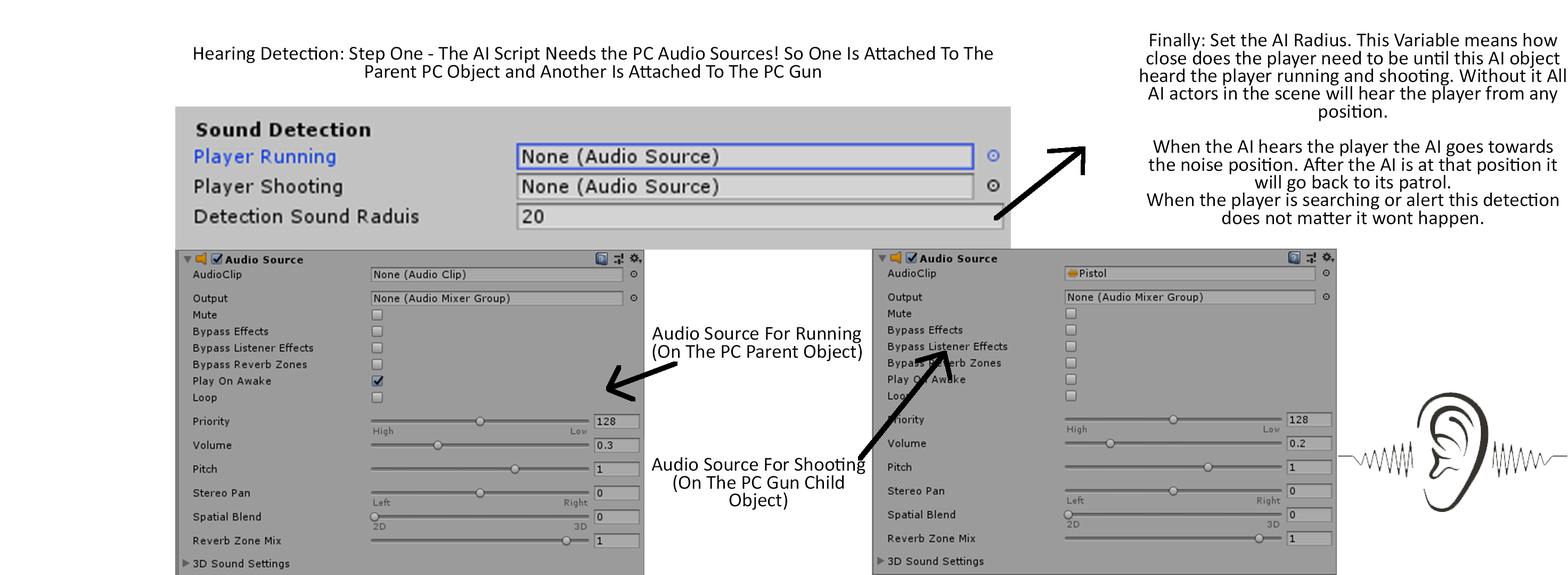
<style>
.page{position:relative;width:1568px;height:575px;background:#ffffff}
.page>*{position:absolute;margin:0}
.t1{font:20px/17.8px "Calibri";color:#000000}
</style>
<div class="page">
<p class="t1" style="left:1140px;top:32px;width:426px;height:196px;text-align:center">Finally: Set the AI Radius. This Variable means how close does the player need to be until this AI object heard the player running and shooting. Without it All AI actors in the scene will hear the player from any position. <br><br>When the AI hears the player the AI goes towards the noise position. After the AI is at that position it will go back to its patrol. <br>When the player is searching or alert this detection does not matter it wont happen.</p>
<p class="t1" style="left:194px;top:46px;width:799px;height:35px;text-align:center">Hearing Detection: Step One - The AI Script Needs the PC Audio Sources! So One Is Attached To The Parent PC Object and Another Is Attached To The PC Gun</p>
<p class="t1" style="left:652px;top:326px;width:210px;height:36px;text-align:center">Audio Source For Running (On The PC Parent Object)</p>
<p class="t1" style="left:651px;top:457px;width:214px;height:53px;text-align:center">Audio Source For Shooting (On The PC Gun Child Object)</p>
</div>
